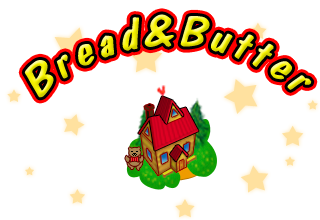
<style>
.page{position:relative;width:320px;height:220px;background:#ffffff}
.page>*{position:absolute;margin:0}
.t1{font:44.9px "DomCasualBT-Regular";letter-spacing:0.095em;font-style:italic}
</style>
<div class="page">
<p class="t1" style="left:24px;top:14px;width:288px;height:84px;rotate:-1deg">Bread&amp;Butter</p>
</div>
